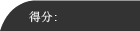
<style>
.page{position:relative;width:140px;height:31px;background:#333333}
.page>*{position:absolute;margin:0}
.t1{font:12px "SimSun";color:#ffffff}
</style>
<div class="page">
<p class="t1" style="left:29px;top:11px;width:28px;height:12px">得分:</p>
</div>
